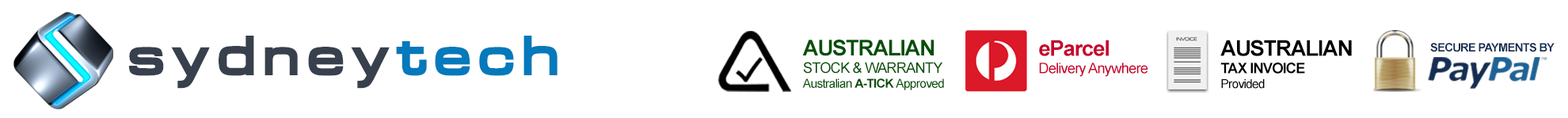
<style>
.page{position:relative;width:1568px;height:118px;background:#ffffff}
.page>*{position:absolute;margin:0}
.t1{font:55.2px "BrinkBlackExtended";letter-spacing:0.08em;color:#37404c}
.t2{font:55.2px "BrinkBlackExtended";letter-spacing:0.08em;color:#0479bb}
.t3{font:14.5px "ArialMT";letter-spacing:-0.05em;color:#034f03}
.t4{font:21.8px "Arial-BoldMT";letter-spacing:-0.05em;color:#034f03}
.t5{font:12.4px "ArialMT";letter-spacing:-0.05em;color:#034f03}
.t6{font:12.4px "Arial-BoldMT";letter-spacing:-0.05em;color:#034f03}
.t7{font:14.5px "ArialMT";letter-spacing:-0.05em;color:#c7002b}
.t8{font:21.8px "Arial-BoldMT";letter-spacing:-0.05em;color:#c7002b}
.t9{font:14.5px "Arial-BoldMT";letter-spacing:-0.05em;color:#000000}
.t10{font:21.8px "Arial-BoldMT";letter-spacing:-0.05em;color:#000000}
.t11{font:12.4px "ArialMT";letter-spacing:-0.05em;color:#000000}
.t12{font:11.6px "Arial-BoldMT";letter-spacing:-0.05em;color:#152d52}
</style>
<div class="page">
<p class="t1" style="left:129px;top:36px;width:429px;height:53px">sydney<span class="t2">tech</span></p>
<p class="t3" style="left:802px;top:40px;width:142px;height:50px"><span class="t4">AUSTRALIAN<br></span>STOCK &amp; WARRANTY<br><span class="t5">Australian </span><span class="t6">A-TICK </span><span class="t5">Approved</span></p>
<p class="t7" style="left:1039px;top:40px;width:109px;height:37px"><span class="t8">eParcel<br></span>Delivery Anywhere</p>
<p class="t9" style="left:1220px;top:40px;width:132px;height:49px"><span class="t10">AUSTRALIAN<br></span>TAX INVOICE<br><span class="t11">Provided</span></p>
<p class="t12" style="left:1430px;top:43px;width:125px;height:9px">SECURE PAYMENTS BY</p>
</div>
